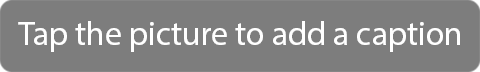
<style>
.page{position:relative;width:480px;height:72px;background:#7d7d7d}
.page>*{position:absolute;margin:0}
.t1{font:33.6px "MyriadPro-Regular";color:#ffffff}
</style>
<div class="page">
<p class="t1" style="left:18px;top:21px;width:442px;height:31px">Tap the picture to add a caption</p>
</div>
